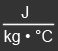
<style>
.page{position:relative;width:58px;height:51px;background:#333333}
.page>*{position:absolute;margin:0}
.t1{font:16px "ArialMT";color:#ffffff}
</style>
<div class="page">
<p class="t1" style="left:21px;top:6px;width:8px;height:12px">J</p>
<p class="t1" style="left:4px;top:30px;width:49px;height:15px">kg • °C</p>
</div>
